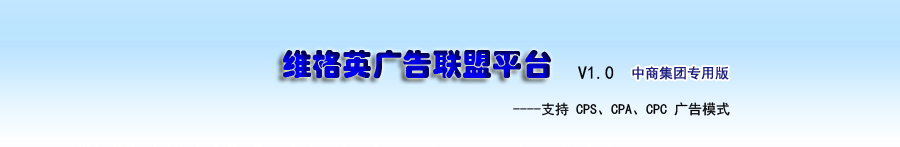
<style>
.page{position:relative;width:900px;height:147px}
.page>*{position:absolute;margin:0}
.t1{font:30px "STHupo"}
.t2{font:18px "SimHei";color:#000000}
.t3{font:14px "SimHei";color:#1d1d7c}
.t4{font:14px "SimHei";color:#000000}
</style>
<div class="page">
<p class="t1" style="left:283px;top:49px;width:268px;height:30px">维格英广告联盟平台</p>
<p class="t2" style="left:578px;top:66px;width:36px;height:13px">V1.0</p>
<p class="t3" style="left:632px;top:66px;width:97px;height:14px">中商集团专用版</p>
<p class="t4" style="left:513px;top:102px;width:217px;height:14px">----支持 CPS、CPA、CPC 广告模式</p>
</div>
